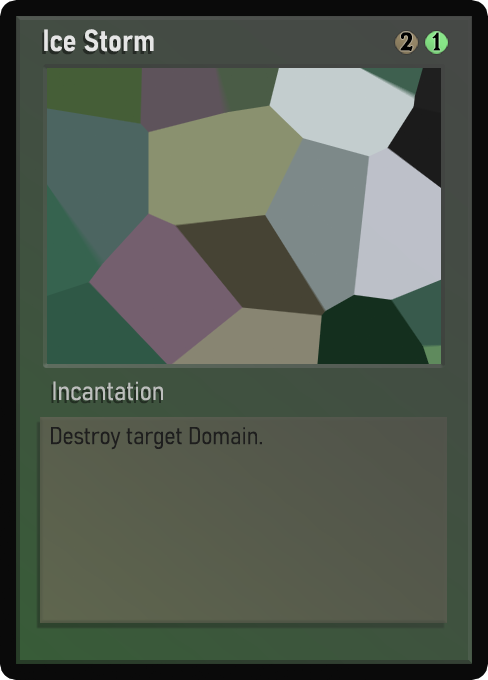
<style>
.page{position:relative;width:488px;height:680px}
.page>*{position:absolute;margin:0}
.t1{font:30px "Bahnschrift-SemiBoldSemiCondensed";color:#f2f2f2;font-weight:bold}
.t2{font:25px "WTRRoycroft";color:#000000;font-weight:bold;scale:1.09 1}
.t3{font:26px "Bahnschrift-LightSemiCondensed";color:#c8c8c8;font-weight:bold}
.t4{font:24px "Bahnschrift-LightSemiCondensed";color:#1e1e1e;font-weight:bold}
</style>
<div class="page">
<p class="t1" style="left:44px;top:29px;width:110px;height:23px;opacity:0.9">Ice Storm</p>
<p class="t2" style="left:400px;top:32px;width:13px;height:19px">2</p>
<p class="t2" style="left:432px;top:32px;width:9px;height:19px">1</p>
<p class="t3" style="left:53px;top:381px;width:110px;height:20px;opacity:0.9">Incantation</p>
<p class="t4" style="left:51px;top:427px;width:211px;height:23px">Destroy target Domain.</p>
</div>
